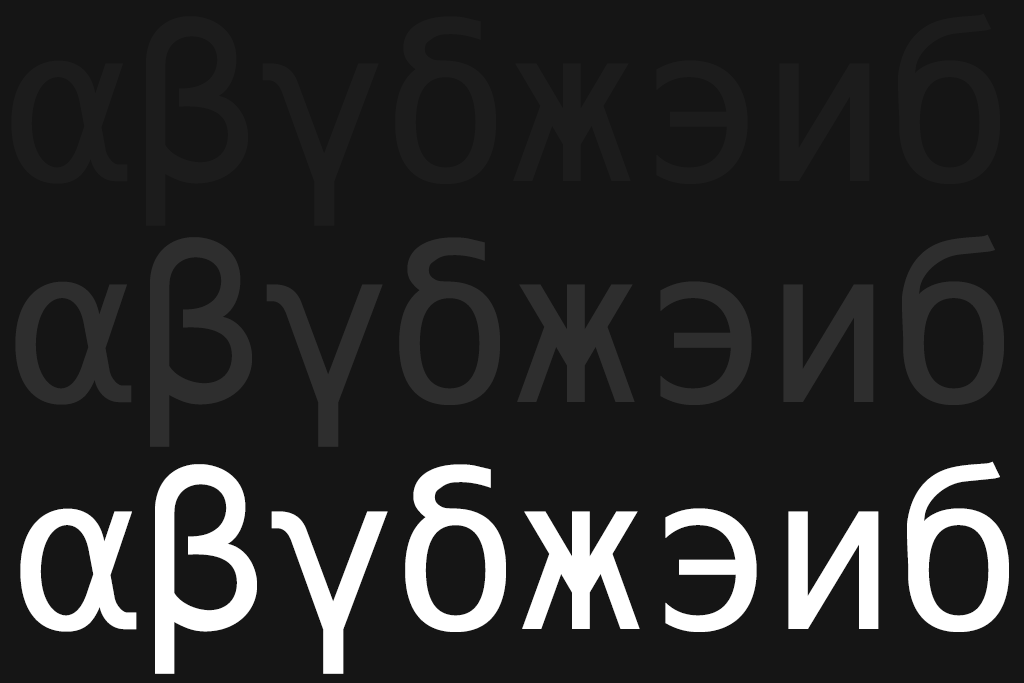
<style>
.page{position:relative;width:1024px;height:683px;background:#151515}
.page>*{position:absolute;margin:0}
.t1{font:215px "Hack-Regular";letter-spacing:-0.015em;color:#1c1c1c}
.t2{font:215px "Hack-Regular";letter-spacing:-0.015em;color:#2e2e2e}
.t3{font:215px "Hack-Regular";letter-spacing:-0.015em;color:#ffffff}
</style>
<div class="page">
<p class="t1" style="left:11px;top:13px;width:989px;height:213px">αβγδжэиб</p>
<p class="t2" style="left:15px;top:234px;width:989px;height:213px">αβγδжэиб</p>
<p class="t3" style="left:20px;top:461px;width:989px;height:213px">αβγδжэиб</p>
</div>
